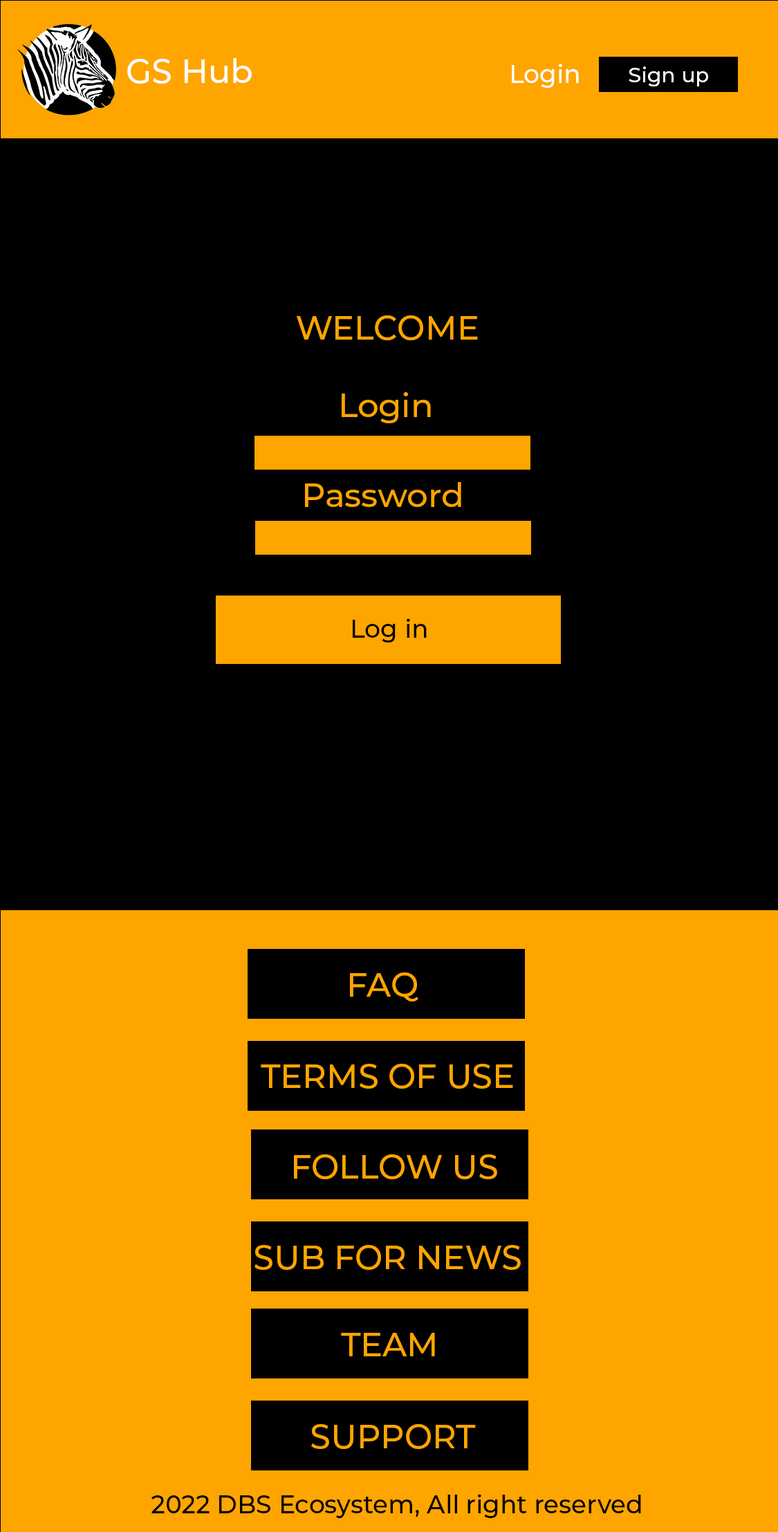
<style>
.page{position:relative;width:778px;height:1532px;background:#000000}
.page>*{position:absolute;margin:0}
.t1{font:33.2px "Montserrat-Medium";color:#ffffff}
.t2{font:24.9px "Montserrat-Medium";color:#ffffff}
.t3{font:20.8px "Montserrat-Medium";color:#ffffff}
.t4{font:33.2px "Montserrat-Medium";color:#ffa500}
.t5{font:24.9px "Montserrat-Medium";color:#000000}
</style>
<div class="page">
<p class="t1" style="left:127px;top:58px;width:125px;height:26px">GS Hub</p>
<p class="t2" style="left:512px;top:64px;width:67px;height:24px">Login</p>
<p class="t3" style="left:629px;top:66px;width:79px;height:20px">Sign up</p>
<p class="t4" style="left:297px;top:315px;width:181px;height:25px">WELCOME</p>
<p class="t4" style="left:342px;top:392px;width:89px;height:31px">Login</p>
<p class="t4" style="left:305px;top:482px;width:156px;height:25px">Password</p>
<p class="t5" style="left:353px;top:618px;width:74px;height:25px">Log in</p>
<p class="t4" style="left:350px;top:973px;width:69px;height:29px">FAQ</p>
<p class="t4" style="left:261px;top:1064px;width:252px;height:25px">TERMS OF USE</p>
<p class="t4" style="left:294px;top:1155px;width:203px;height:24px">FOLLOW US</p>
<p class="t4" style="left:255px;top:1245px;width:266px;height:25px">SUB FOR NEWS</p>
<p class="t4" style="left:341px;top:1333px;width:94px;height:24px">TEAM</p>
<p class="t4" style="left:311px;top:1424px;width:165px;height:25px">SUPPORT</p>
<p class="t5" style="left:151px;top:1494px;width:490px;height:24px">2022 DBS Ecosystem, All right reserved</p>
</div>
